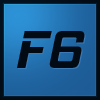
<style>
.page{position:relative;width:100px;height:100px}
.page>*{position:absolute;margin:0}
.t1{font:54px "HemiHeadRg-BoldItalic";color:#020b14}
</style>
<div class="page">
<p class="t1" style="left:17px;top:31px;width:68px;height:37px">F6</p>
</div>
